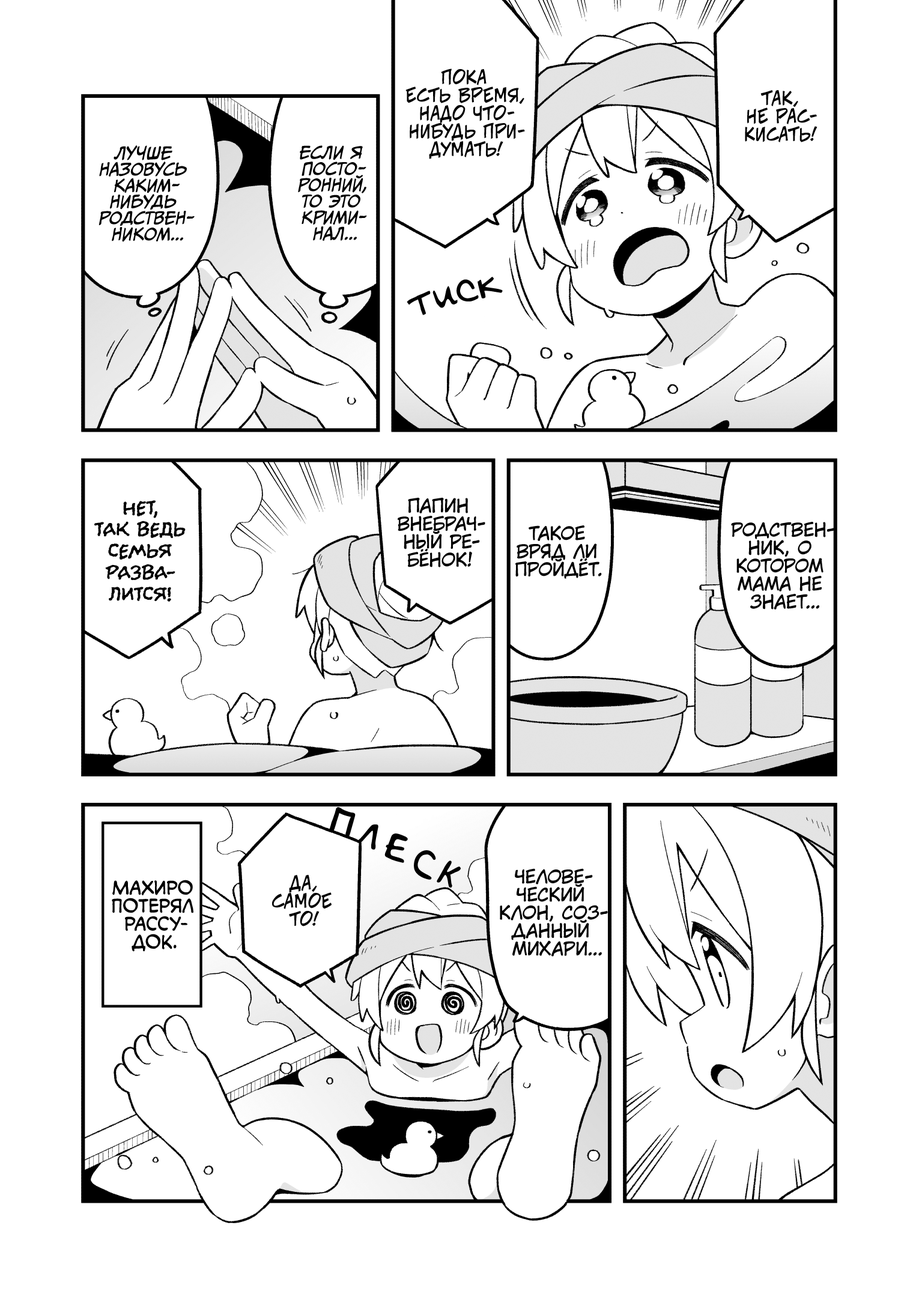
<style>
.page{position:relative;width:919px;height:1297px;background:#ffffff}
.page>*{position:absolute;margin:0}
.t1{font:18px "v_CCJeffCampbell";color:#000000;text-transform:uppercase}
.t2{font:16.2px "CCMeanwhile";color:#000000;text-transform:uppercase;font-style:italic}
.t3{font:43.2px "v_Augie";color:#000000}
.t4{font:18px "KuraiVoice2";color:#000000;text-transform:uppercase}
.t5{font:21.6px "el_CCEvilSchemes";color:#000000;text-transform:uppercase}
.t6{font:32.4px "AkbarPlain";color:#000000;text-transform:uppercase}
.t7{font:18px "v_CCMonologous";color:#000000;text-transform:uppercase}
</style>
<div class="page">
<p class="t1" style="left:405px;top:68px;width:120px;height:91px;text-align:center">Пока<br>есть время,<br>надо что-<br>нибудь при-<br>думать!</p>
<p class="t1" style="left:745px;top:90px;width:73px;height:52px;text-align:center">Так,<br>не рас-<br>кисать!</p>
<p class="t2" style="left:99px;top:145px;width:96px;height:97px;text-align:center">Лучше<br>назовусь<br>каким-<br>нибудь<br>родствен-<br>ником...</p>
<p class="t2" style="left:298px;top:145px;width:69px;height:96px;text-align:center">Если я<br>посто-<br>ронний,<br>то это<br>крими-<br>нал...</p>
<p class="t3" style="left:407px;top:276px;width:96px;height:39px;rotate:-16deg">тиск</p>
<p class="t4" style="left:398px;top:497px;width:87px;height:71px;text-align:center">Папин<br>внебрач-<br>ный ре-<br>бёнок!</p>
<p class="t5" style="left:94px;top:500px;width:92px;height:102px;text-align:center">Нет,<br>так ведь<br>семья<br>разва-<br>лится!</p>
<p class="t4" style="left:731px;top:522px;width:103px;height:88px;text-align:center">Родствен-<br>ник, о<br>котором<br>мама не<br>знает...</p>
<p class="t4" style="left:515px;top:526px;width:87px;height:53px;text-align:center">Такое<br>вряд ли<br>пройдёт.</p>
<p class="t6" style="left:329px;top:807px;width:27px;height:32px;rotate:17deg">п</p>
<p class="t6" style="left:356px;top:825px;width:22px;height:25px;rotate:23deg">л</p>
<p class="t6" style="left:384px;top:834px;width:24px;height:29px;rotate:24deg">е</p>
<p class="t6" style="left:414px;top:851px;width:22px;height:29px;rotate:16deg">с</p>
<p class="t6" style="left:437px;top:861px;width:24px;height:27px;rotate:23deg">к</p>
<p class="t4" style="left:500px;top:869px;width:108px;height:88px;text-align:center">Челове-<br>ческий<br>клон, соз-<br>данный<br>Михари...</p>
<p class="t7" style="left:112px;top:880px;width:81px;height:72px;text-align:center">Махиро<br>потерял<br>рассу-<br>док.</p>
<p class="t1" style="left:272px;top:875px;width:60px;height:52px;text-align:center">Да,<br>самое<br>то!</p>
</div>
